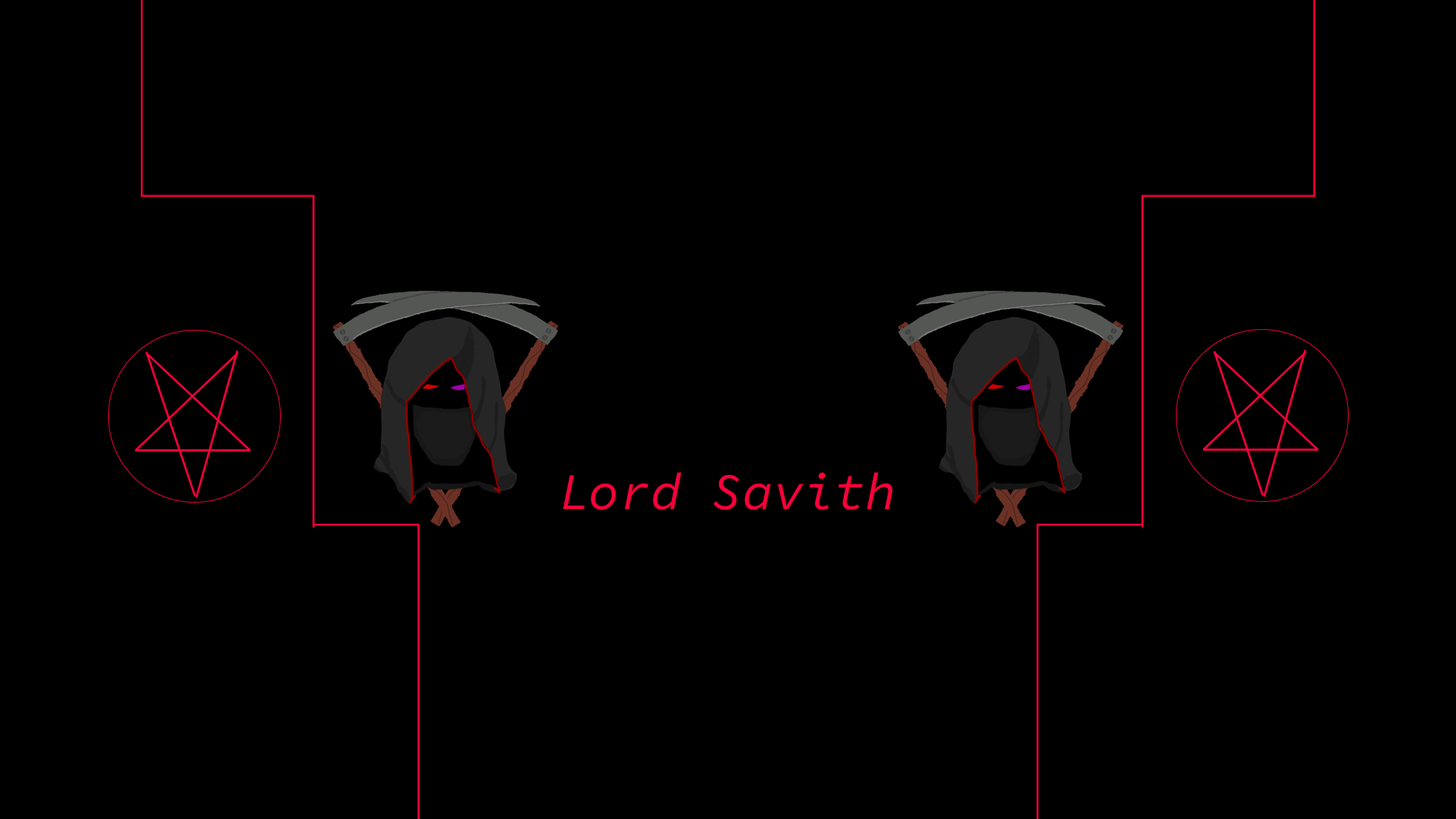
<style>
.page{position:relative;width:1456px;height:819px;background:#000000}
.page>*{position:absolute;margin:0}
.t1{font:51.2px "SourceCodePro-Regular";color:#f9003a}
</style>
<div class="page">
<p class="t1" style="left:563px;top:472px;width:330px;height:38px">Lord Savith</p>
</div>
